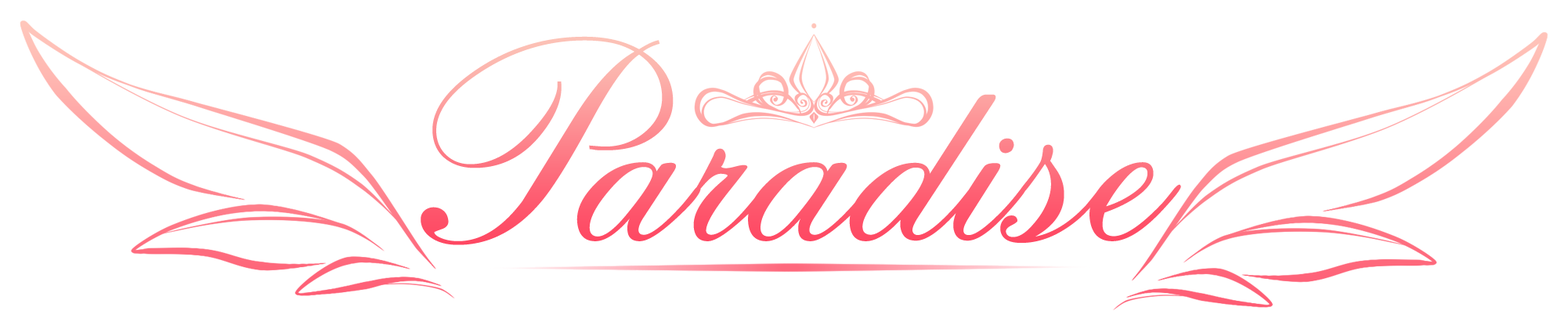
<style>
.page{position:relative;width:1568px;height:329px;background:#ffffff}
.page>*{position:absolute;margin:0}
.t1{font:285.3px "VNIWed1"}
.t2{font:285.3px "VNI-Kun-Bold"}
</style>
<div class="page">
<p class="t1" style="left:421px;top:36px;width:760px;height:209px"><span class="t2">P</span>aradise</p>
</div>
